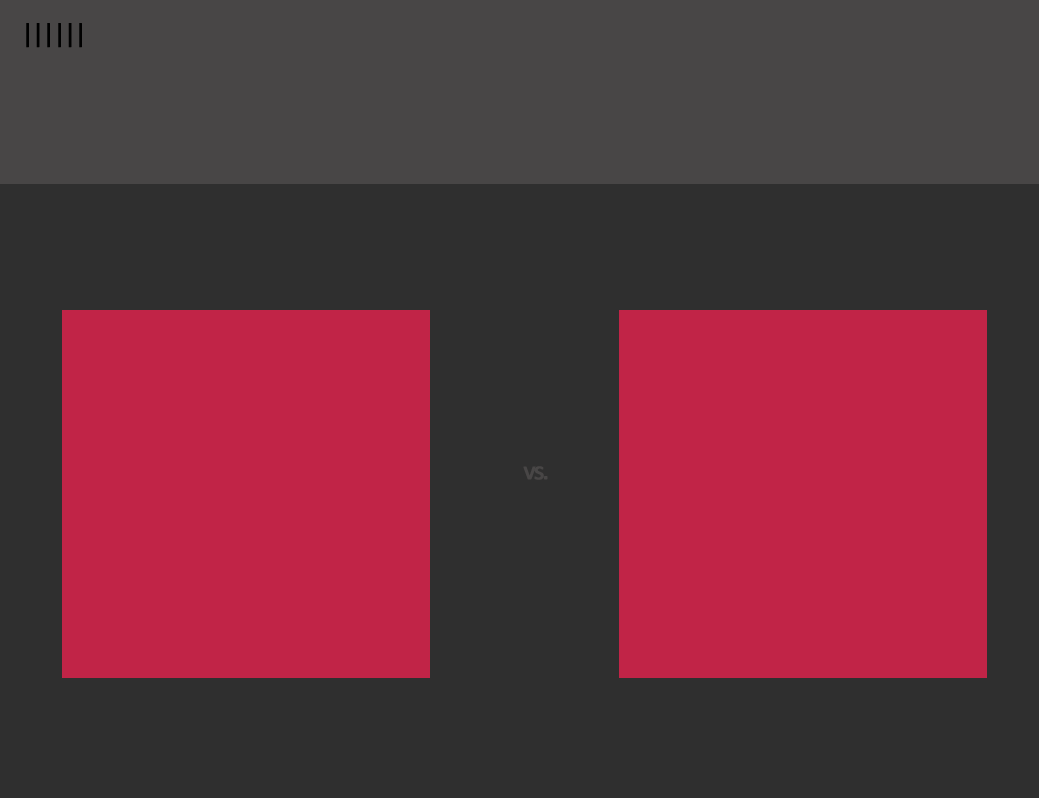
<style>
.page{position:relative;width:1039px;height:798px;background:#2f2f2f}
.page>*{position:absolute;margin:0}
.t1{font:27px "Calibri";letter-spacing:-0.1em;color:#484646;font-weight:bold}
</style>
<div class="page">
<p class="t1" style="left:523px;top:466px;width:25px;height:14px">vs.</p>
</div>
